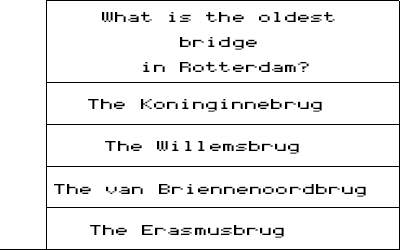
<style>
.page{position:relative;width:400px;height:250px;background:#ffffff}
.page>*{position:absolute;margin:0}
.t1{font:22.9px/25px "Coder's-Crux";color:#000000;scale:1.5 1}
.t2{font:22.9px "Coder's-Crux";color:#000000;scale:1.5 1}
</style>
<div class="page">
<p class="t1" style="left:102px;top:12px;width:233px;height:60px;text-align:center">What is the oldest <br>bridge <br>in Rotterdam?</p>
<p class="t2" style="left:88px;top:99px;width:234px;height:13px">The Koninginnebrug</p>
<p class="t2" style="left:105px;top:141px;width:194px;height:13px">The Willemsbrug</p>
<p class="t2" style="left:54px;top:184px;width:312px;height:13px">The van Briennenoordbrug</p>
<p class="t2" style="left:90px;top:225px;width:194px;height:13px">The Erasmusbrug</p>
</div>
